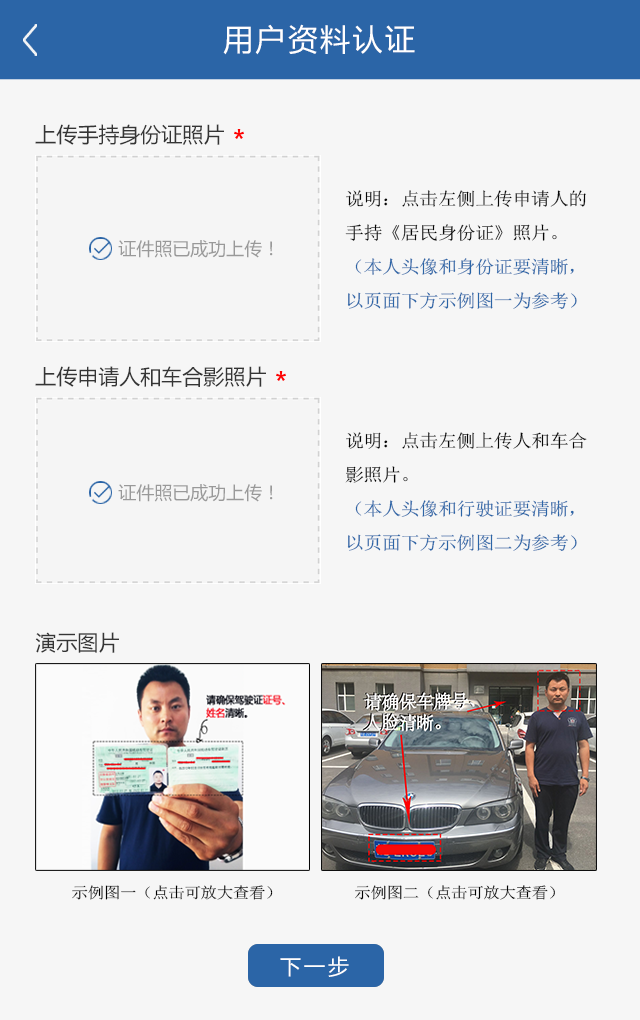
<style>
.page{position:relative;width:640px;height:1020px;background:#f6f6f6}
.page>*{position:absolute;margin:0}
.t1{font:30px "MicrosoftYaHei";letter-spacing:0.08em;color:#ffffff}
.t2{font:21px "MicrosoftYaHei";color:#353535}
.t3{font:18px/34px "SimSun";letter-spacing:-0.02em;color:#2b65a7;scale:1.06 1}
.t4{font:18px/34px "SimSun";letter-spacing:-0.02em;color:#060606;scale:1.06 1}
.t5{font:18px "MicrosoftYaHei";color:#999999}
.t6{font:15.6px "SimSun";letter-spacing:-0.02em;color:#000000;scale:1.06 1}
.t7{font:21px "MicrosoftYaHei";letter-spacing:0.14em;color:#ffffff}
</style>
<div class="page">
<p class="t1" style="left:223px;top:24px;width:192px;height:31px">用户资料认证</p>
<p class="t2" style="left:35px;top:124px;width:189px;height:21px">上传手持身份证照片</p>
<p class="t3" style="left:345px;top:190px;width:241px;height:119px"><span class="t4">说明：点击左侧上传申请人的手持《居民身份证》照片。<br></span>（本人头像和身份证要清晰，以页面下方示例图一为参考）</p>
<p class="t5" style="left:118px;top:240px;width:155px;height:18px">证件照已成功上传！</p>
<p class="t2" style="left:35px;top:366px;width:231px;height:21px">上传申请人和车合影照片</p>
<p class="t3" style="left:345px;top:432px;width:242px;height:119px"><span class="t4">说明：点击左侧上传人和车合影照片。<br></span>（本人头像和行驶证要清晰，以页面下方示例图二为参考）</p>
<p class="t5" style="left:118px;top:484px;width:155px;height:18px">证件照已成功上传！</p>
<p class="t2" style="left:35px;top:632px;width:84px;height:21px">演示图片</p>
<p class="t6" style="left:72px;top:885px;width:201px;height:15px">示例图一（点击可放大查看）</p>
<p class="t6" style="left:355px;top:885px;width:200px;height:15px">示例图二（点击可放大查看）</p>
<p class="t7" style="left:280px;top:956px;width:69px;height:21px">下一步</p>
</div>
